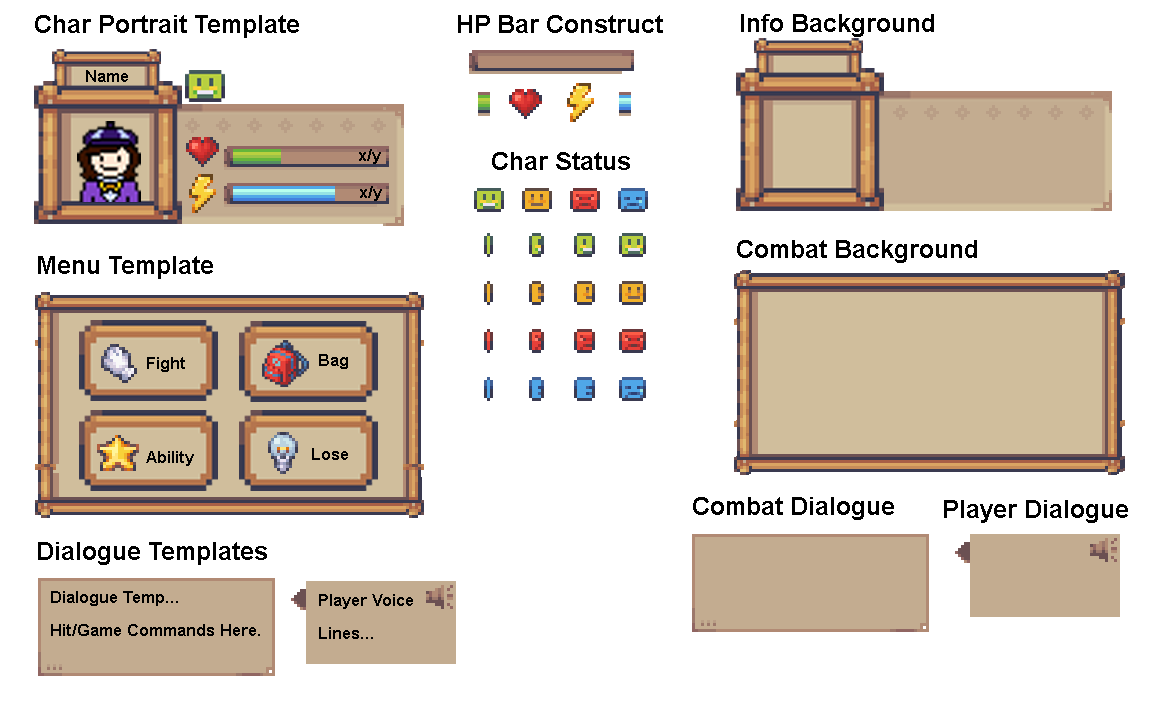
<style>
.page{position:relative;width:1152px;height:720px;background:#ffffff}
.page>*{position:absolute;margin:0}
.t1{font:25px "Arial-BoldMT";color:#000000}
.t2{font:16.7px "Arial-BoldMT";color:#000000}
.t3{font:16.7px/33.3px "Arial-BoldMT";color:#000000}
</style>
<div class="page">
<p class="t1" style="left:35px;top:15px;width:264px;height:23px">Char Portrait Template</p>
<p class="t1" style="left:458px;top:15px;width:205px;height:18px">HP Bar Construct</p>
<p class="t1" style="left:741px;top:14px;width:193px;height:23px">Info Background</p>
<p class="t2" style="left:86px;top:70px;width:42px;height:12px">Name</p>
<p class="t2" style="left:359px;top:149px;width:22px;height:15px">x/y</p>
<p class="t1" style="left:492px;top:152px;width:138px;height:18px">Char Status</p>
<p class="t2" style="left:360px;top:186px;width:22px;height:15px">x/y</p>
<p class="t1" style="left:737px;top:240px;width:240px;height:23px">Combat Background</p>
<p class="t1" style="left:38px;top:256px;width:175px;height:23px">Menu Template</p>
<p class="t2" style="left:147px;top:357px;width:38px;height:15px">Fight</p>
<p class="t2" style="left:319px;top:354px;width:29px;height:15px">Bag</p>
<p class="t2" style="left:312px;top:448px;width:36px;height:12px">Lose</p>
<p class="t2" style="left:146px;top:451px;width:48px;height:15px">Ability</p>
<p class="t1" style="left:693px;top:497px;width:201px;height:23px">Combat Dialogue</p>
<p class="t1" style="left:944px;top:500px;width:184px;height:23px">Player Dialogue</p>
<p class="t1" style="left:38px;top:542px;width:229px;height:23px">Dialogue Templates</p>
<p class="t3" style="left:51px;top:591px;width:209px;height:45px">Dialogue Temp...<br>Hit/Game Commands Here.</p>
<p class="t3" style="left:319px;top:594px;width:94px;height:45px">Player Voice<br>Lines...</p>
</div>
